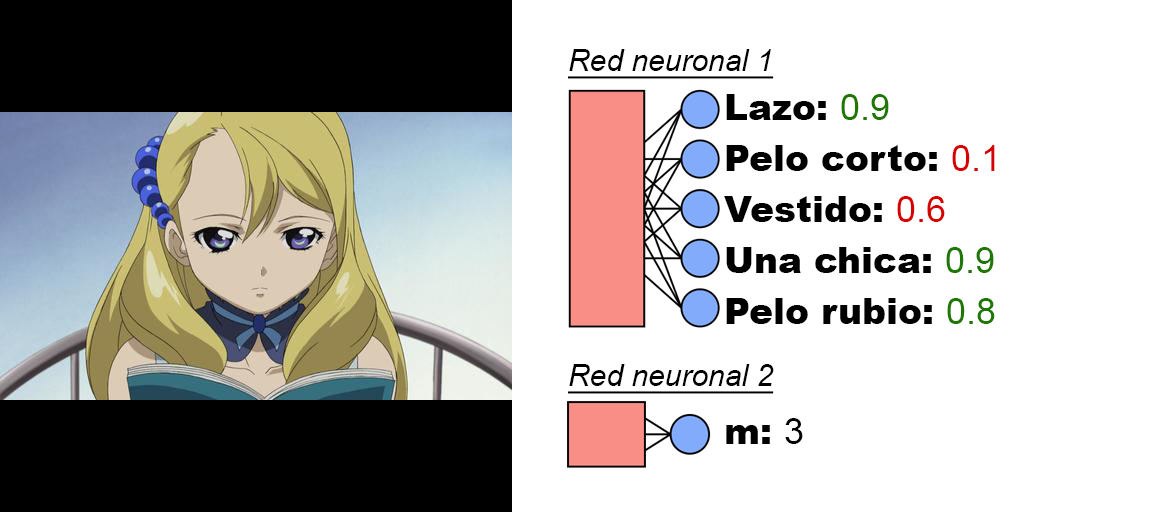
<style>
.page{position:relative;width:1154px;height:512px;background:#ffffff}
.page>*{position:absolute;margin:0}
.t1{font:30px "Arial-ItalicMT";color:#000000;text-decoration:underline}
.t2{font:36px "Arial-Black";color:#000000}
.t3{font:36px "ArialMT";color:#1e7800}
.t4{font:36px "ArialMT";color:#d70000}
.t5{font:36px "ArialMT";color:#000000}
</style>
<div class="page">
<p class="t1" style="left:568px;top:49px;width:206px;height:30px">Red neuronal 1</p>
<p class="t2" style="left:726px;top:94px;width:163px;height:26px">Lazo: <span class="t3">0.9</span></p>
<p class="t2" style="left:726px;top:145px;width:269px;height:26px">Pelo corto: <span class="t4">0.1</span></p>
<p class="t2" style="left:724px;top:196px;width:221px;height:26px">Vestido: <span class="t4">0.6</span></p>
<p class="t2" style="left:726px;top:247px;width:268px;height:26px">Una chica: <span class="t3">0.9</span></p>
<p class="t2" style="left:726px;top:298px;width:269px;height:26px">Pelo rubio: <span class="t3">0.8</span></p>
<p class="t1" style="left:568px;top:364px;width:206px;height:30px">Red neuronal 2</p>
<p class="t2" style="left:726px;top:418px;width:77px;height:26px">m: <span class="t5">3</span></p>
</div>
